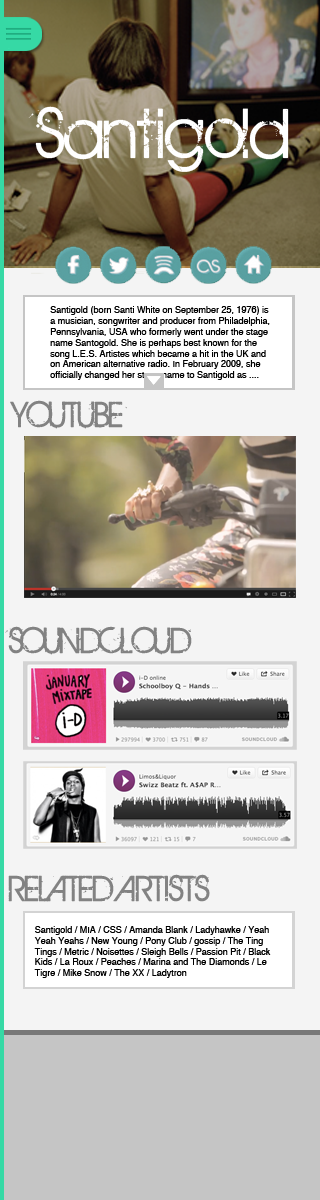
<style>
.page{position:relative;width:320px;height:1200px;background:#f4f4f4}
.page>*{position:absolute;margin:0}
.t1{font:77px "BIRTHOFAHERO";color:#ffffff}
.t2{font:9px "Helvetica";color:#000000}
.t3{font:39px "BIRTHOFAHERO";color:#828282}
</style>
<div class="page">
<p class="t1" style="left:28px;top:106px;width:261px;height:66px">Santigold</p>
<p class="t2" style="left:50px;top:306px;width:220px;height:74px">Santigold (born Santi White on September 25, 1976) is <br>a musician, songwriter and producer from Philadelphia, <br>Pennsylvania, USA who formerly went under the stage <br>name Santogold. She is perhaps best known for the <br>song L.E.S. Artistes which became a hit in the UK and <br>on American alternative radio. In February 2009, she <br>officially changed her stage name to Santigold as ....</p>
<p class="t3" style="left:10px;top:400px;width:117px;height:29px">YOUTUBE</p>
<p class="t3" style="left:5px;top:626px;width:187px;height:29px">SOUNDCLOUD</p>
<p class="t3" style="left:8px;top:874px;width:202px;height:28px">RELATED ARTISTS</p>
<p class="t2" style="left:34px;top:926px;width:237px;height:52px">Santigold / MIA / CSS / Amanda Blank / Ladyhawke / Yeah <br>Yeah Yeahs / New Young / Pony Club / gossip / The Ting <br>Tings / Metric / Noisettes / Sleigh Bells / Passion Pit / Black<br>Kids / La Roux / Peaches / Marina and The Diamonds / Le <br>Tigre / Mike Snow / The XX / Ladytron</p>
</div>
